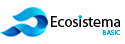
<style>
.page{position:relative;width:125px;height:44px;background:#ffffff}
.page>*{position:absolute;margin:0}
.t1{font:15.3px "MyriadPro-Regular";color:#000000}
.t2{font:7.3px "MyriadPro-Regular";color:#01abdc}
</style>
<div class="page">
<p class="t1" style="left:51px;top:16px;width:70px;height:11px">Ecosistema</p>
<p class="t2" style="left:102px;top:30px;width:19px;height:5px">BASIC</p>
</div>
